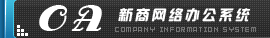
<style>
.page{position:relative;width:270px;height:38px}
.page>*{position:absolute;margin:0}
.t1{font:36px "AntsyPants";letter-spacing:0.2em;color:#ffffff;font-style:italic}
.t2{font:14px "hzgb";letter-spacing:0.2em;color:#ffffff;font-style:italic}
</style>
<div class="page">
<p class="t1" style="left:39px;top:5px;width:63px;height:26px">OA</p>
<p class="t2" style="left:118px;top:8px;width:133px;height:14px">新商网络办公系统</p>
</div>
